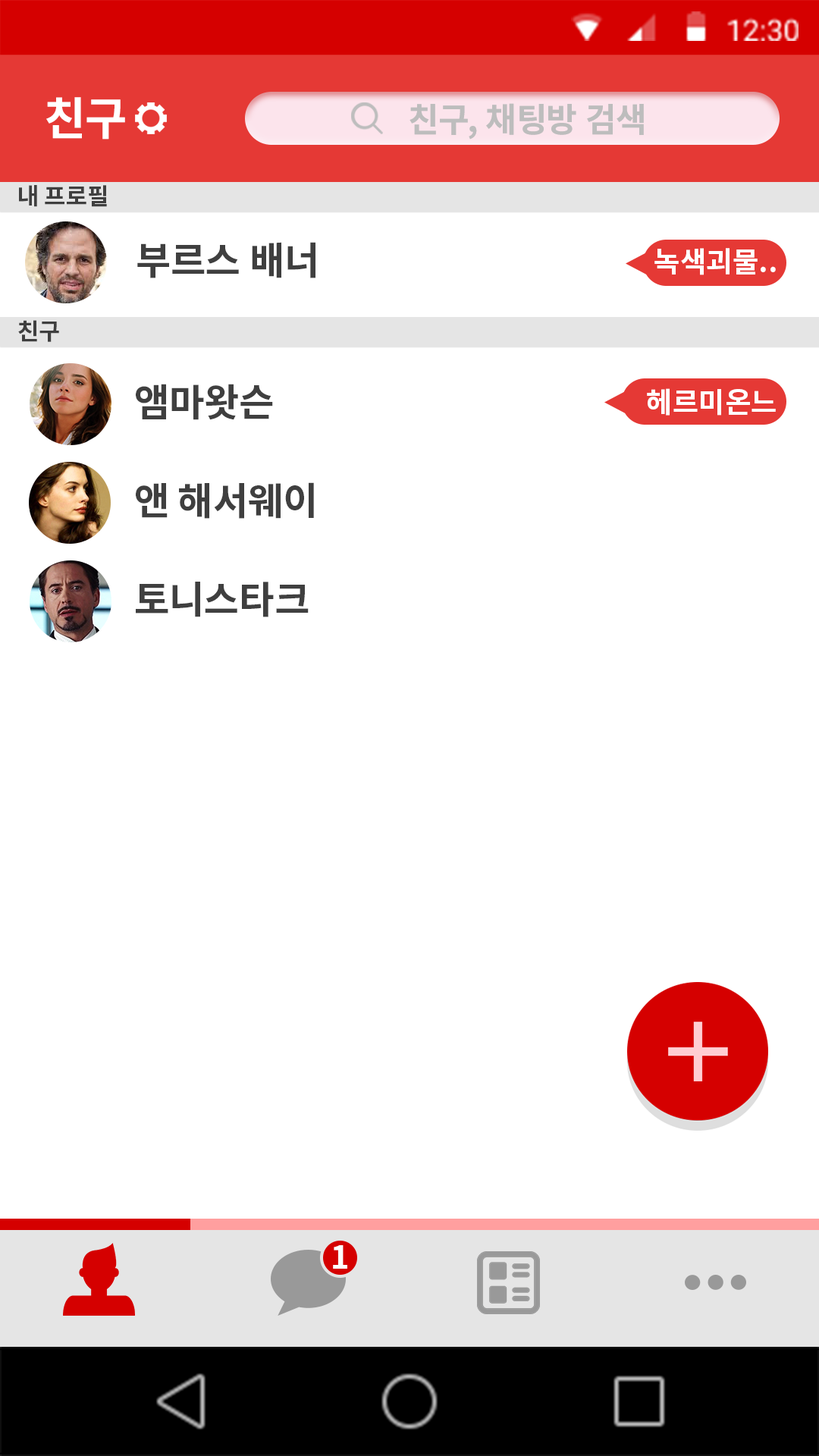
<style>
.page{position:relative;width:819px;height:1456px;background:#ffffff}
.page>*{position:absolute;margin:0}
.t1{font:45.2px "NotoSansCJKkr-Bold";letter-spacing:0.005em;color:#ffffff}
.t2{font:23.3px "NotoSansCJKkr-Bold";color:#3f3f3f}
.t3{font:38.1px "NotoSansCJKkr-Bold";color:#3f3f3f}
.t4{font:28.5px "NotoSansCJKkr-Bold";color:#ffffff}
.t5{font:31.8px "NotoSansCJKkr-Bold";color:#ffffff}
</style>
<div class="page">
<p class="t1" style="left:46px;top:97px;width:79px;height:43px">친구</p>
<p class="t2" style="left:19px;top:185px;width:88px;height:22px">내 프로필</p>
<p class="t3" style="left:137px;top:242px;width:178px;height:36px">부르스 배너</p>
<p class="t4" style="left:654px;top:248px;width:122px;height:27px">녹색괴물..</p>
<p class="t2" style="left:18px;top:320px;width:41px;height:22px">친구</p>
<p class="t3" style="left:136px;top:384px;width:137px;height:36px">앰마왓슨</p>
<p class="t4" style="left:647px;top:388px;width:129px;height:28px">헤르미온느</p>
<p class="t3" style="left:136px;top:482px;width:178px;height:37px">앤 해서웨이</p>
<p class="t3" style="left:136px;top:582px;width:173px;height:35px">토니스타크</p>
<p class="t5" style="left:333px;top:1245px;width:14px;height:24px">1</p>
</div>
